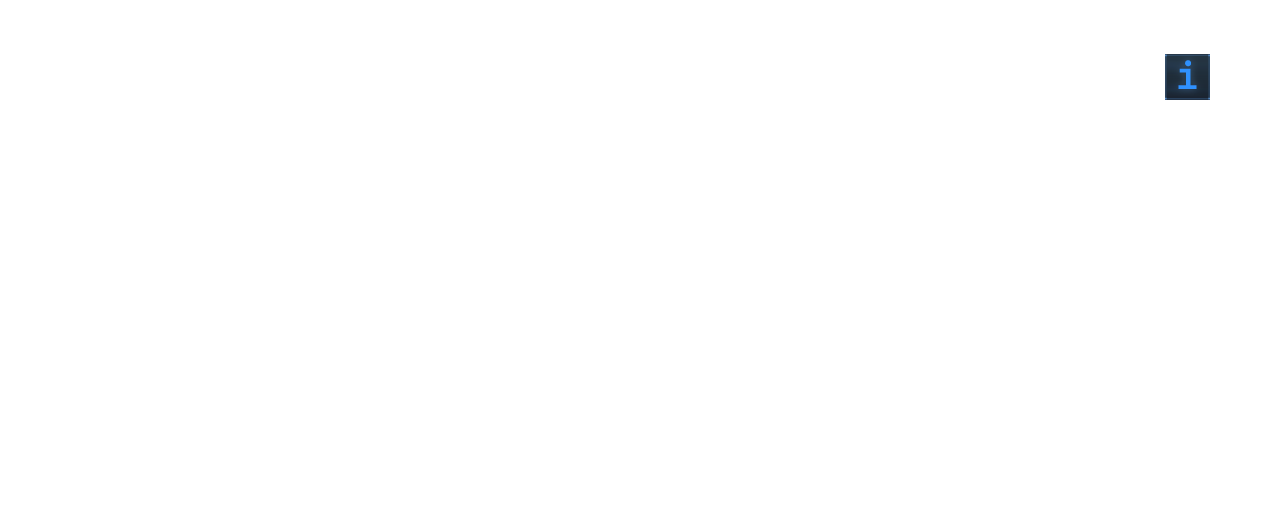
<style>
.page{position:relative;width:1288px;height:524px;background:#ffffff}
.page>*{position:absolute;margin:0}
.t1{font:38px "CascadiaMono-Roman";color:#2f91fe;font-weight:bold}
</style>
<div class="page">
<p class="t1" style="left:1178px;top:60px;width:19px;height:29px">i</p>
</div>
